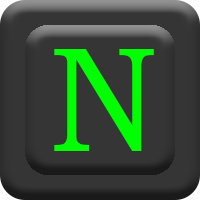
<style>
.page{position:relative;width:200px;height:200px;background:#353535}
.page>*{position:absolute;margin:0}
.t1{font:150px "BookmanOldStyle";color:#00ff00}
</style>
<div class="page">
<p class="t1" style="left:54px;top:49px;width:100px;height:102px">N</p>
</div>
